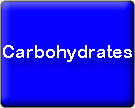
<style>
.page{position:relative;width:135px;height:108px;background:#0600ff}
.page>*{position:absolute;margin:0}
.t1{font:18px "ArialRoundedMTBold";color:#ffffff}
</style>
<div class="page">
<p class="t1" style="left:3px;top:45px;width:129px;height:17px">Carbohydrates</p>
</div>
